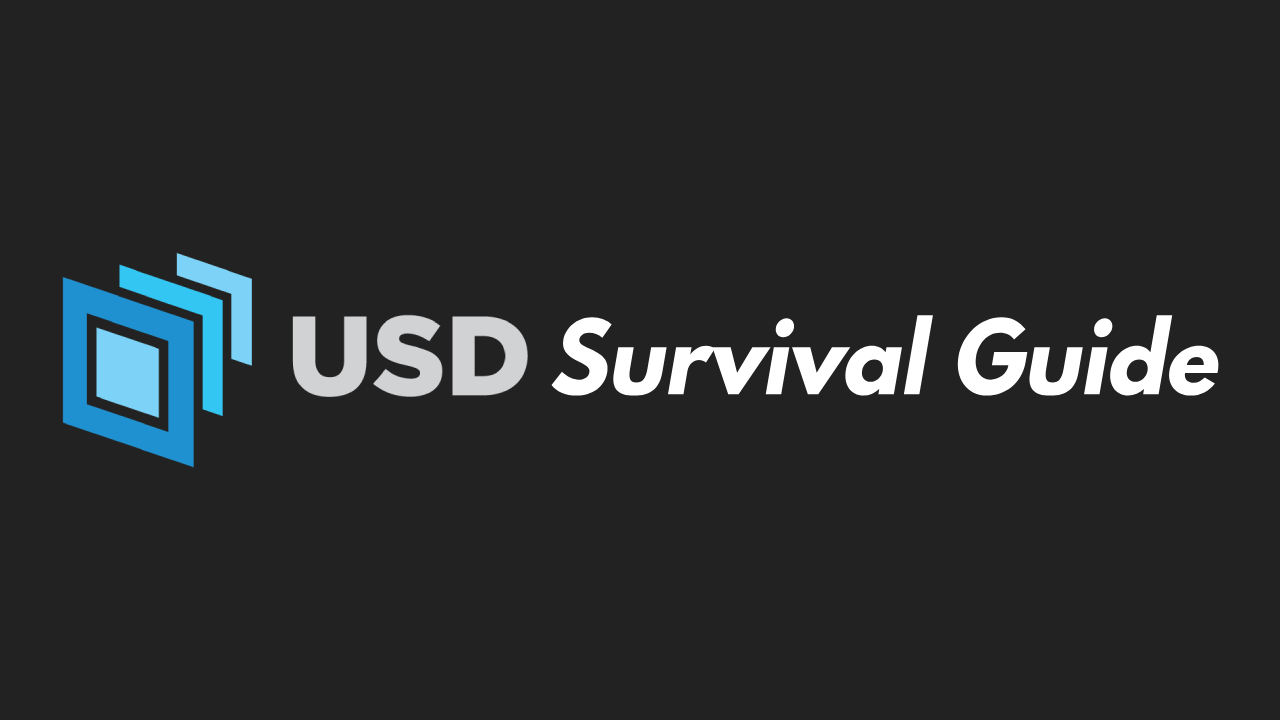
<style>
.page{position:relative;width:1280px;height:720px;background:#222222}
.page>*{position:absolute;margin:0}
.t1{font:100.8px "SpartanMB-ExtraBold";color:#ffffff;font-style:italic;scale:0.95 1}
</style>
<div class="page">
<p class="t1" style="left:551px;top:315px;width:668px;height:81px">Survival Guide</p>
</div>
